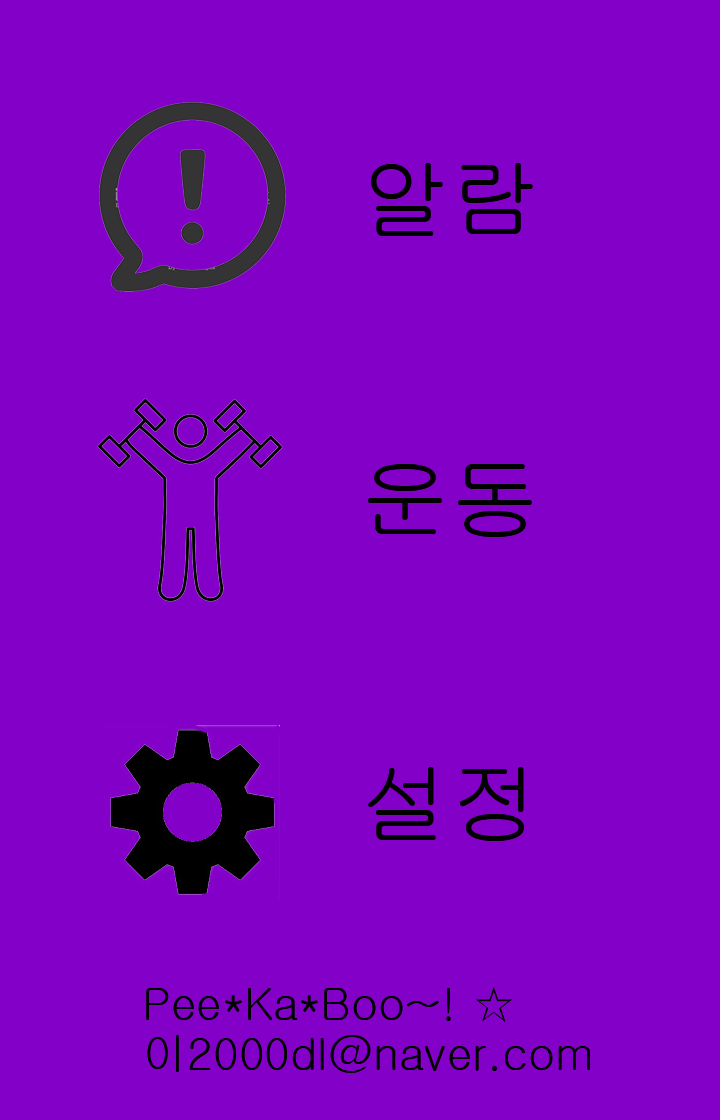
<style>
.page{position:relative;width:720px;height:1120px;background:#8300c8}
.page>*{position:absolute;margin:0}
.t1{font:90px "Gulim";color:#010101}
.t2{font:45px/50px "Gulim";color:#000000}
</style>
<div class="page">
<p class="t1" style="left:371px;top:163px;width:162px;height:73px">알람</p>
<p class="t1" style="left:368px;top:464px;width:164px;height:73px">운동</p>
<p class="t1" style="left:368px;top:767px;width:156px;height:74px">설정</p>
<p class="t2" style="left:146px;top:987px;width:444px;height:86px">Pee*Ka*Boo~! ☆<br>이2000dl@naver.com</p>
</div>
